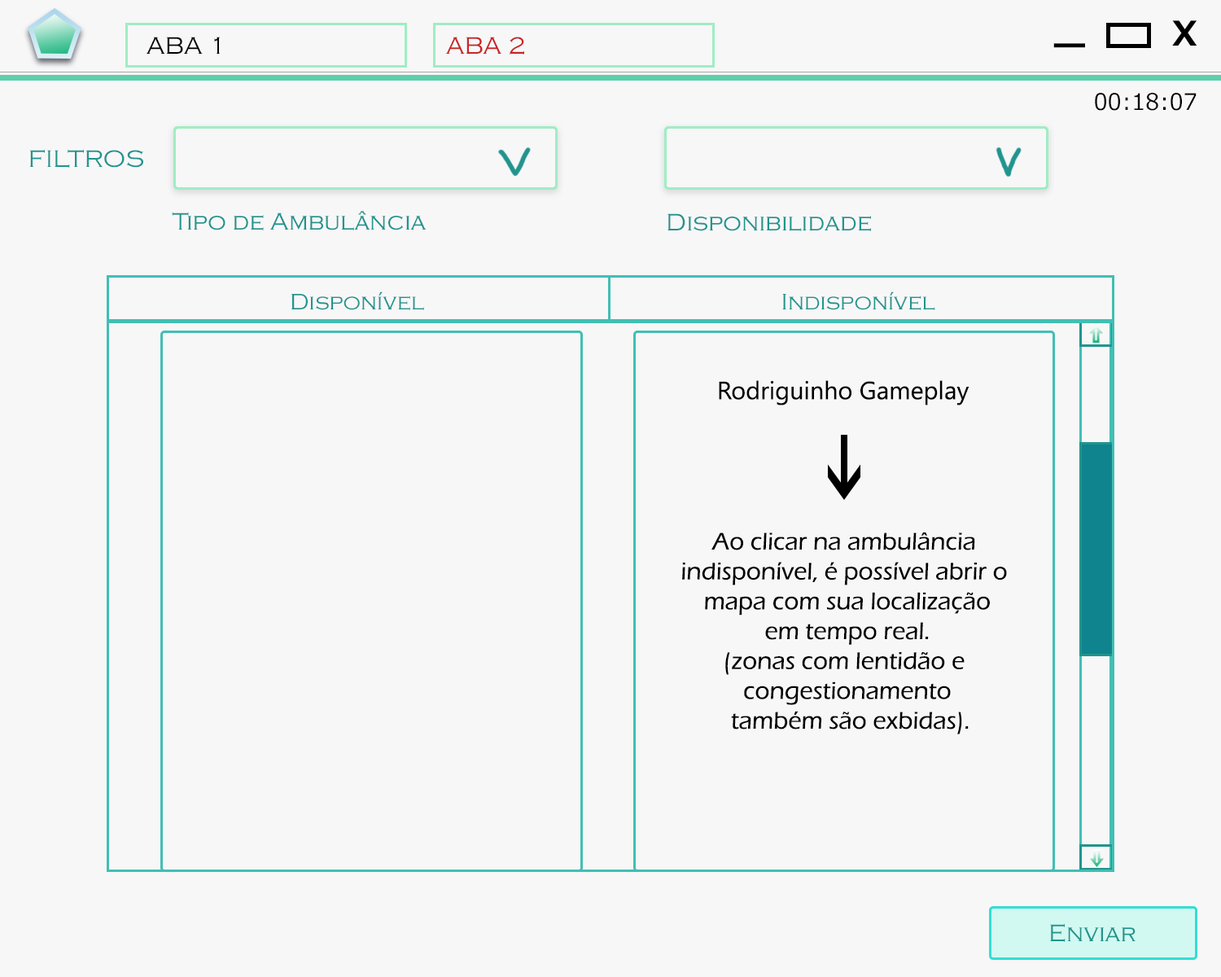
<style>
.page{position:relative;width:1221px;height:977px;background:#f7f7f8}
.page>*{position:absolute;margin:0}
.t1{font:33.9px "Meiryo-Bold";color:#000000}
.t2{font:24.9px "CopperplateGothic-Light";color:#000000}
.t3{font:24.9px "CopperplateGothic-Light";color:#c72525}
.t4{font:45.2px "Meiryo-Bold";color:#000000}
.t5{font:22.6px "Meiryo";color:#000000}
.t6{font:24.9px "CopperplateGothic-Light";color:#21948d}
.t7{font:23.3px "CopperplateGothic-Light";color:#21948d}
.t8{font:24.9px "ErasITC-Medium";color:#000000}
</style>
<div class="page">
<p class="t1" style="left:1172px;top:20px;width:25px;height:26px">X</p>
<p class="t2" style="left:147px;top:37px;width:73px;height:17px">ABA 1</p>
<p class="t3" style="left:446px;top:37px;width:78px;height:18px">ABA 2</p>
<p class="t4" style="left:1053px;top:43px;width:32px;height:5px">_</p>
<p class="t5" style="left:1095px;top:93px;width:101px;height:18px">00:18:07</p>
<p class="t6" style="left:29px;top:149px;width:114px;height:19px">FILTROS</p>
<p class="t6" style="left:172px;top:211px;width:254px;height:19px">Tipo de Ambulância</p>
<p class="t6" style="left:667px;top:213px;width:204px;height:18px">Disponibilidade</p>
<p class="t7" style="left:291px;top:291px;width:133px;height:19px">Disponível</p>
<p class="t7" style="left:782px;top:291px;width:153px;height:19px">Indisponível</p>
<p class="t8" style="left:682px;top:532px;width:325px;height:202px;text-align:center">Ao clicar na ambulância <br>indisponível, é possível abrir o <br>mapa com sua localização<br>em tempo real.<br>(zonas com lentidão e <br>congestionamento<br> também são exbidas).</p>
<p class="t6" style="left:1050px;top:923px;width:85px;height:19px">Enviar</p>
</div>
